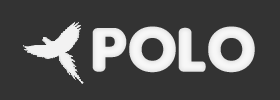
<style>
.page{position:relative;width:280px;height:100px;background:#333333}
.page>*{position:absolute;margin:0}
.t1{font:66.7px "Insaniburger";color:#f7f7f7}
</style>
<div class="page">
<p class="t1" style="left:92px;top:26px;width:163px;height:47px">polo</p>
</div>
